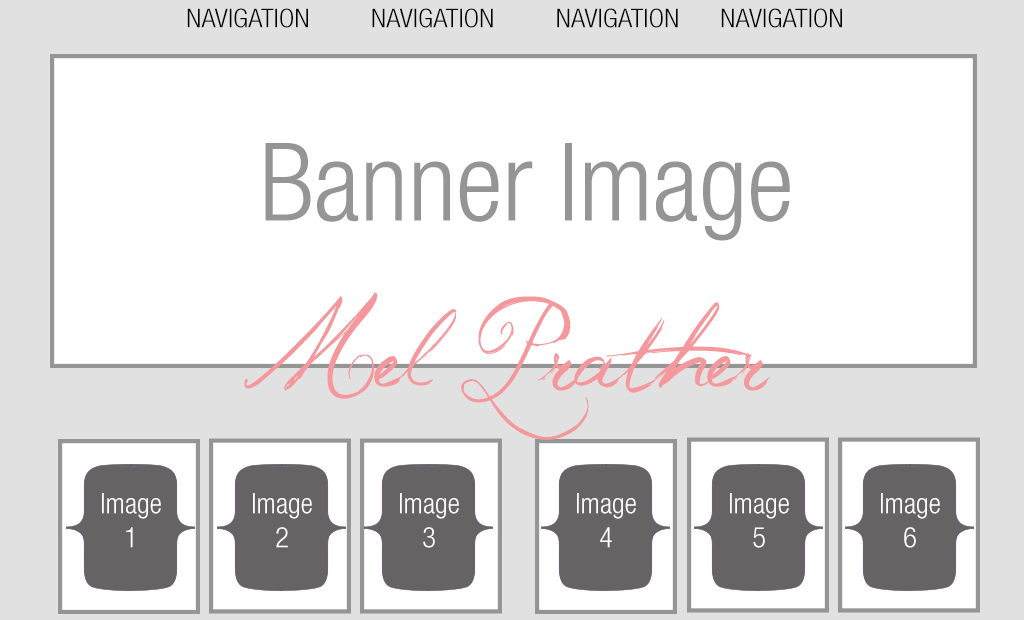
<style>
.page{position:relative;width:1024px;height:620px;background:#ffffff}
.page>*{position:absolute;margin:0}
.t1{font:25.8px "HelveticaNeue-LightCond";color:#000000;scale:1.1 1}
.t2{font:108.3px "HelveticaNeue-LightCond";color:#959595}
.t3{font:107.7px "Jellyka-Western-Princess";color:#f5989d;scale:0.96 1}
.t4{font:28.4px "HelveticaNeue-LightCond";color:#ffffff}
</style>
<div class="page">
<p class="t1" style="left:187px;top:8px;width:655px;height:20px">NAVIGATION         NAVIGATION         NAVIGATION      NAVIGATION</p>
<p class="t2" style="left:265px;top:143px;width:525px;height:98px">Banner Image</p>
<p class="t3" style="left:244px;top:291px;width:527px;height:149px">Mel Prather</p>
<p class="t4" style="left:102px;top:493px;width:59px;height:55px;text-align:center">Image 1</p>
<p class="t4" style="left:253px;top:493px;width:59px;height:55px;text-align:center">Image 2</p>
<p class="t4" style="left:400px;top:493px;width:59px;height:55px;text-align:center">Image 3</p>
<p class="t4" style="left:577px;top:493px;width:59px;height:55px;text-align:center">Image 4</p>
<p class="t4" style="left:730px;top:493px;width:59px;height:55px;text-align:center">Image 5</p>
<p class="t4" style="left:881px;top:493px;width:59px;height:55px;text-align:center">Image 6</p>
</div>
